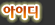
<style>
.page{position:relative;width:55px;height:25px;background:#333333}
.page>*{position:absolute;margin:0}
.t1{font:14px "-2002"}
</style>
<div class="page">
<p class="t1" style="left:3px;top:6px;width:35px;height:13px">아이디</p>
</div>
